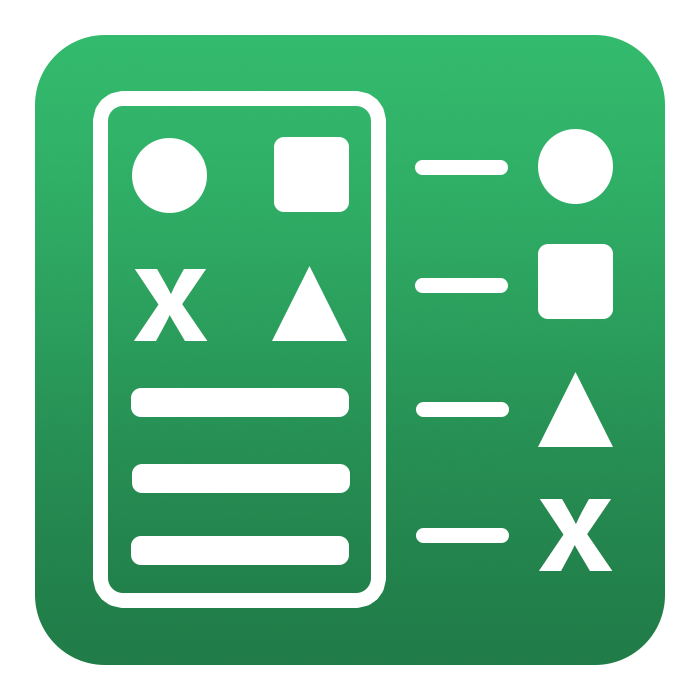
<style>
.page{position:relative;width:700px;height:700px;background:#ffffff}
.page>*{position:absolute;margin:0}
.t1{font:106.9px "MyriadPro-Bold";color:#ffffff;scale:1.18 1}
</style>
<div class="page">
<p class="t1" style="left:134px;top:269px;width:74px;height:72px">X</p>
<p class="t1" style="left:539px;top:499px;width:74px;height:72px">X</p>
</div>
